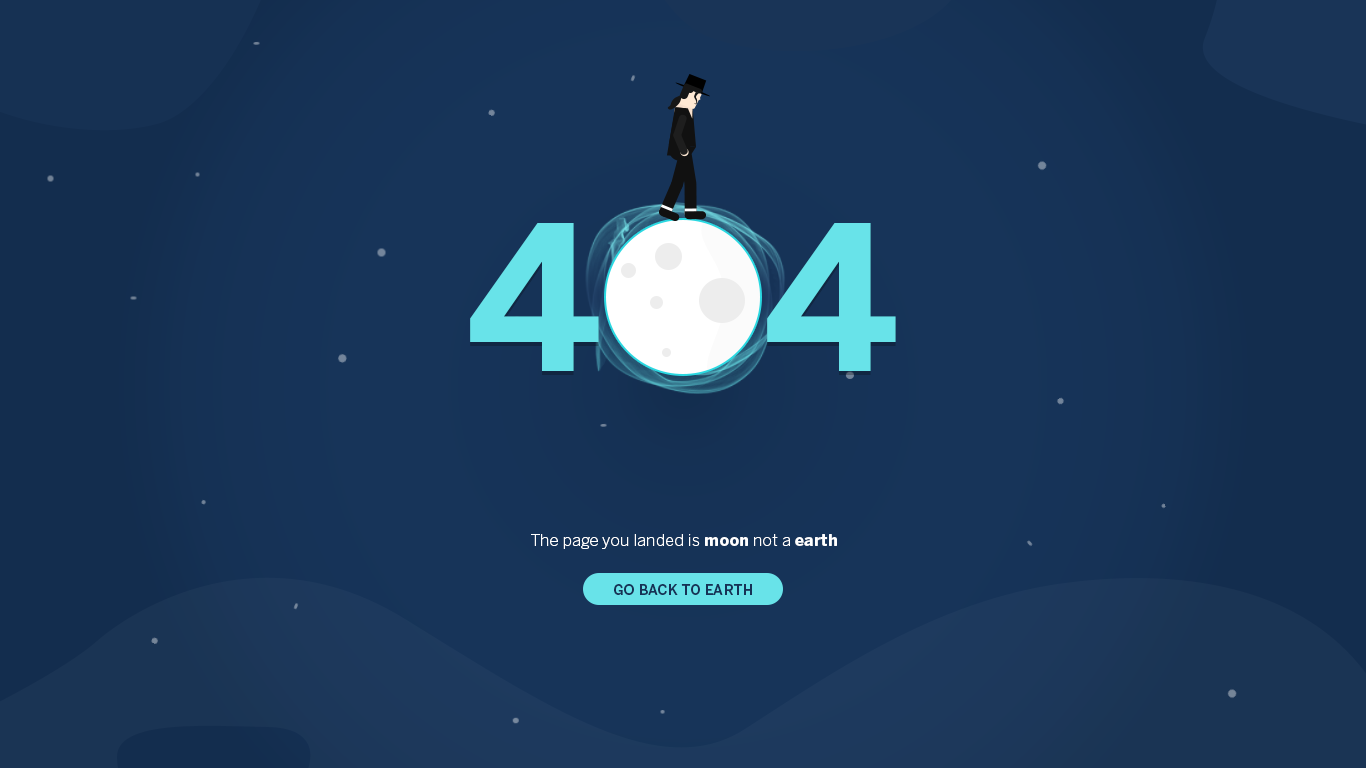
<style>
.page{position:relative;width:1366px;height:768px;background:#173459}
.page>*{position:absolute;margin:0}
.t1{font:200px "BentonSans-Bold";color:#68e3e9}
.t2{font:16px "BentonSans-Light";letter-spacing:0.02em;color:#ffffff}
.t3{font:16px "BentonSans-Bold";letter-spacing:0.02em;color:#ffffff}
.t4{font:14px "BentonSans-Medium";letter-spacing:0.02em;color:#163256;text-transform:uppercase}
</style>
<div class="page">
<p class="t1" style="left:470px;top:223px;width:426px;height:148px">4   4</p>
<p class="t2" style="left:531px;top:534px;width:306px;height:15px">The page you landed is <span class="t3">moon</span> not a <span class="t3">earth</span></p>
<p class="t4" style="left:614px;top:584px;width:138px;height:11px">Go back to Earth</p>
</div>
